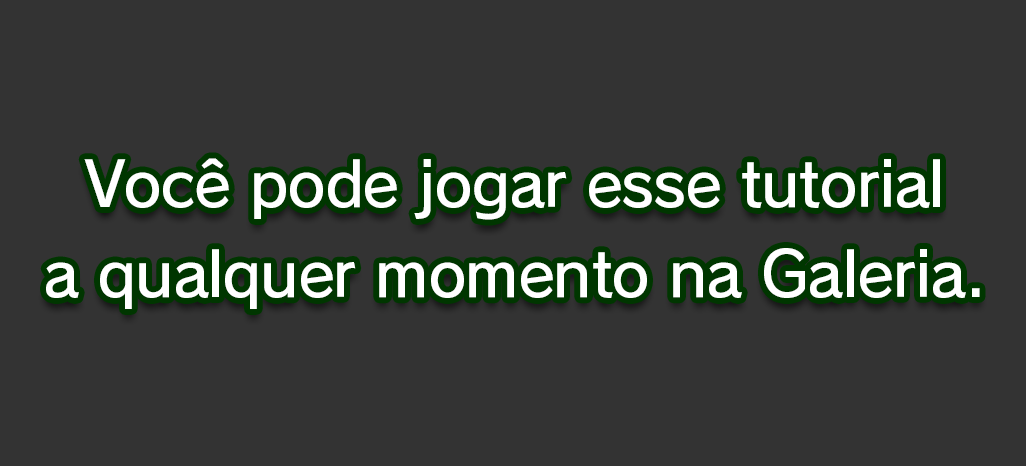
<style>
.page{position:relative;width:1026px;height:466px;background:#333333}
.page>*{position:absolute;margin:0}
.t1{font:61.3px/90.7px "RodinPro-DB";letter-spacing:-0.022em;color:#ffffff}
</style>
<div class="page">
<p class="t1" style="left:46px;top:158px;width:934px;height:151px;text-align:center">Você pode jogar esse tutorial<br>a qualquer momento na Galeria.</p>
</div>
